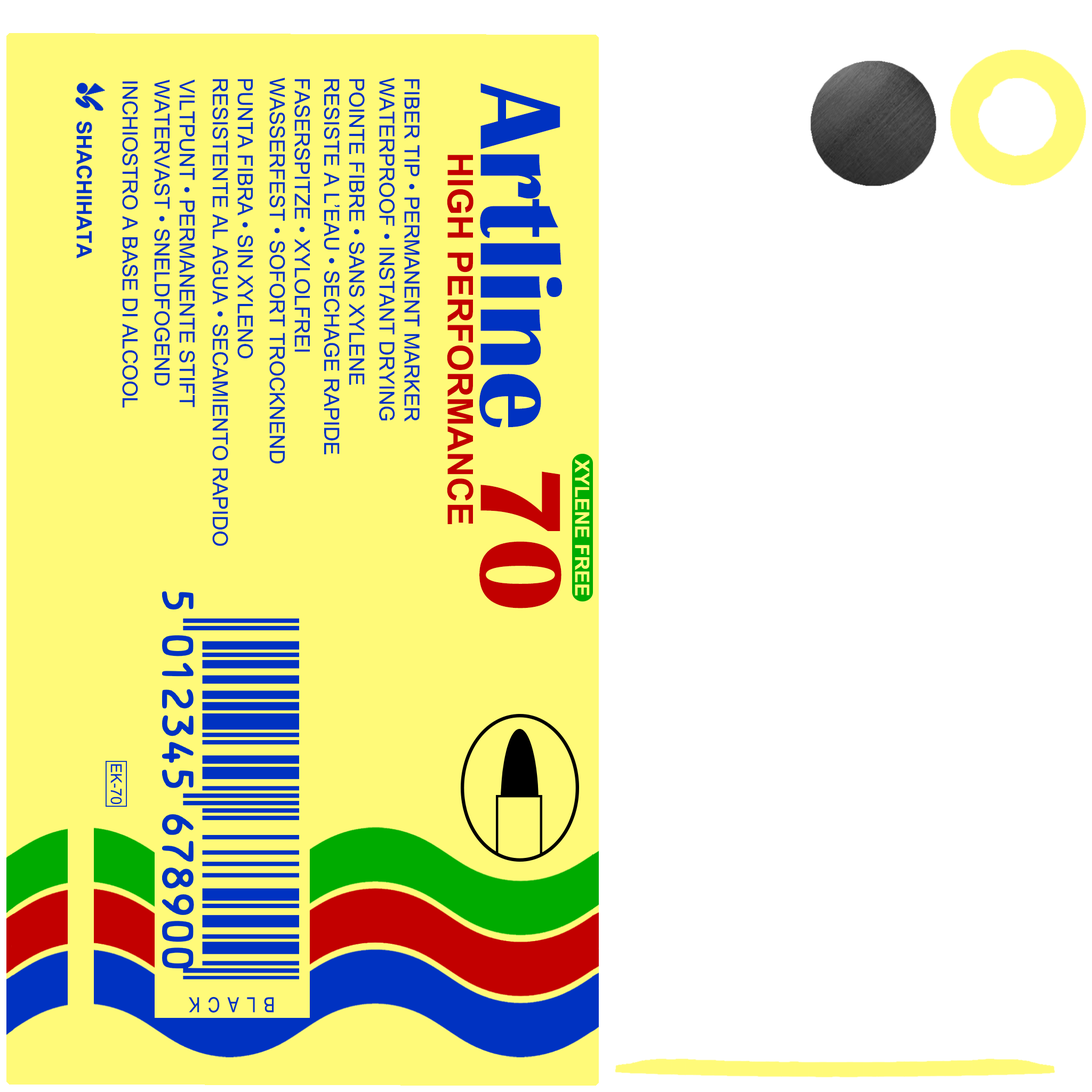
<style>
.page{position:relative;width:1092px;height:1092px;background:#ffffff}
.page>*{position:absolute;margin:0}
.t1{font:20.8px "ArialMT";color:#0032c1}
.t2{font:118.9px "BritannicBold";color:#0032c1}
.t3{font:118.9px "BritannicBold";color:#c20000}
.t4{font:20.8px "Arial-BoldMT";color:#0032c1}
.t5{font:35.2px "Arial-BoldMT";color:#c20000}
.t6{font:15px "ArialMT";color:#0032c1}
.t7{font:20.8px "ArialNarrow";letter-spacing:0.36em;color:#0032c1}
</style>
<div class="page">
<p class="t1" style="left:269px;top:77px;width:41px;height:387px;rotate:90deg">FASERSPITZE • XYLOLFREI<br>WASSERFEST • SOFORT TROCKNEND</p>
<p class="t1" style="left:379px;top:77px;width:41px;height:345px;rotate:90deg">FIBER TIP • PERMANENT MARKER<br>WATERPROOF • INSTANT DRYING</p>
<p class="t1" style="left:122px;top:81px;width:16px;height:327px;rotate:90deg">INCHIOSTRO A BASE DI ALCOOL</p>
<p class="t1" style="left:154px;top:79px;width:41px;height:328px;rotate:90deg">VILTPUNT • PERMANENTE STIFT<br>WATERVAST • SNELDFOGEND</p>
<p class="t1" style="left:212px;top:79px;width:41px;height:467px;rotate:90deg">PUNTA FIBRA • SIN XYLENO<br>RESISTENTE AL AGUA • SECAMIENTO RAPIDO</p>
<p class="t1" style="left:324px;top:79px;width:41px;height:375px;rotate:90deg">POINTE FIBRE • SANS XYLENE<br>RESISTE A L’EAU • SECHAGE RAPIDE</p>
<p class="t2" style="left:479px;top:83px;width:83px;height:525px;rotate:90deg">Artline <span class="t3">70</span></p>
<p class="t4" style="left:76px;top:121px;width:16px;height:138px;rotate:90deg">SHACHIHATA</p>
<p class="t5" style="left:447px;top:155px;width:26px;height:369px;rotate:90deg">HIGH PERFORMANCE</p>
<p class="t6" style="left:110px;top:764px;width:12px;height:40px;rotate:90deg">EK-70</p>
<p class="t7" style="left:189px;top:997px;width:85px;height:16px;rotate:180deg">BLACK</p>
</div>
